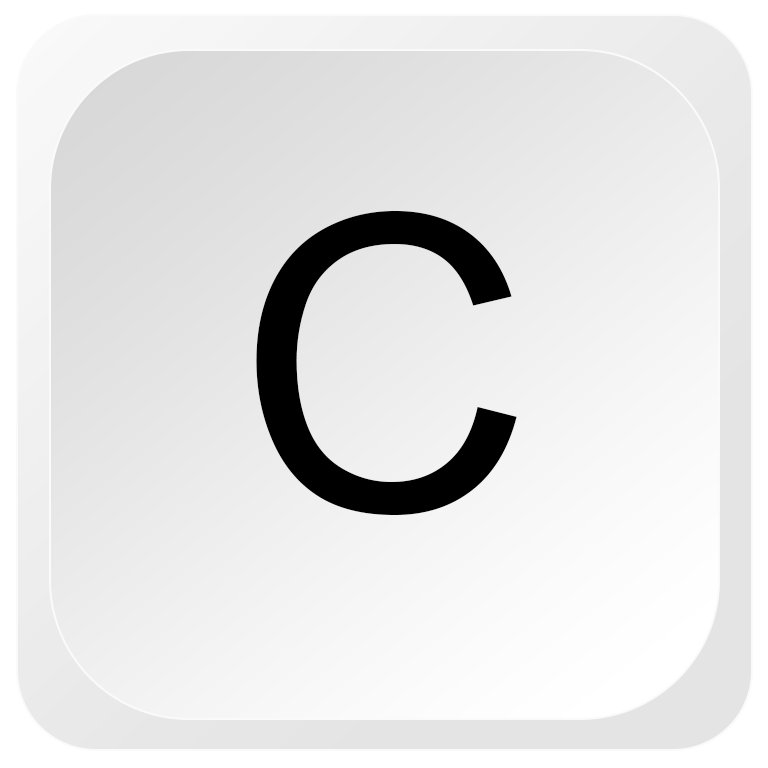
<style>
.page{position:relative;width:768px;height:768px}
.page>*{position:absolute;margin:0}
.t1{font:411px "ArialMT";color:#000000}
</style>
<div class="page">
<p class="t1" style="left:256px;top:211px;width:261px;height:304px">C</p>
</div>
